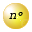
<style>
.page{position:relative;width:32px;height:32px;background:#ffffff}
.page>*{position:absolute;margin:0}
.t1{font:12px "Courier-Oblique";color:#000000}
</style>
<div class="page">
<p class="t1" style="left:9px;top:12px;width:14px;height:7px">n°</p>
</div>
